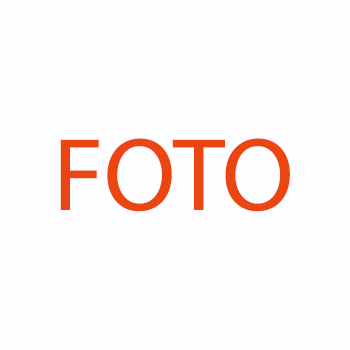
<style>
.page{position:relative;width:350px;height:350px;background:#fefdff}
.page>*{position:absolute;margin:0}
.t1{font:104.2px "MyriadPro-Regular";color:#eb4511;text-transform:uppercase}
</style>
<div class="page">
<p class="t1" style="left:60px;top:138px;width:230px;height:74px">foto</p>
</div>
